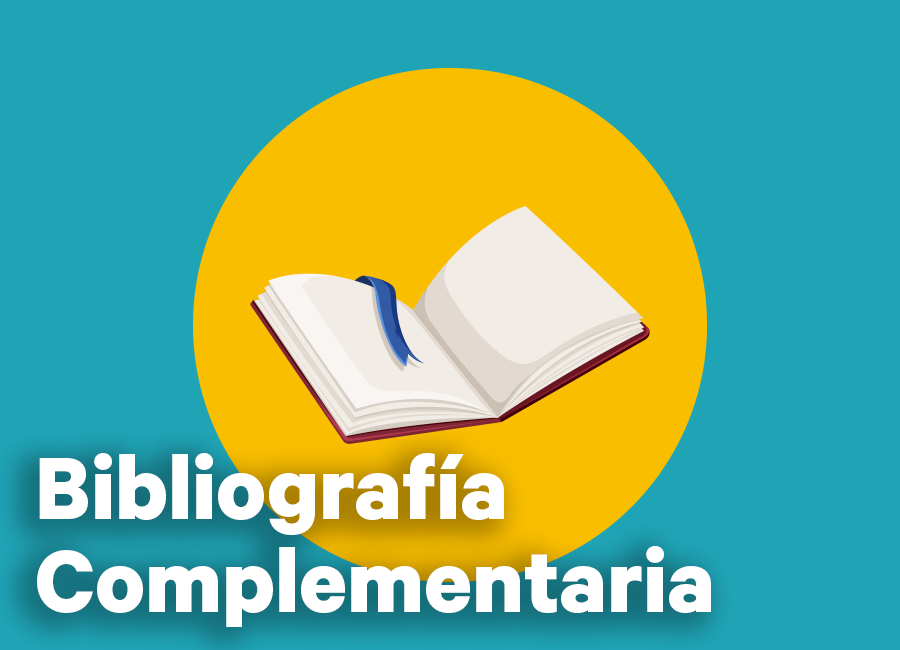
<style>
.page{position:relative;width:900px;height:650px;background:#1fa4b6}
.page>*{position:absolute;margin:0}
.t1{font:100px/93px "Calibre-Bold";color:#ffffff}
</style>
<div class="page">
<p class="t1" style="left:37px;top:453px;width:674px;height:174px">Bibliografía <br>Complementaria</p>
</div>
